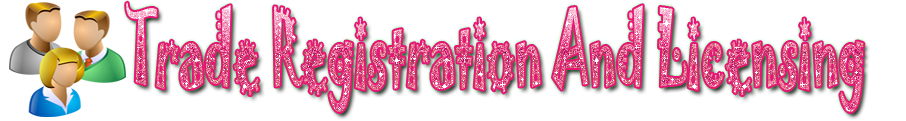
<style>
.page{position:relative;width:906px;height:121px;background:#ffffff}
.page>*{position:absolute;margin:0}
.t1{font:91.8px "Jokerman-Regular";scale:0.49 1}
</style>
<div class="page">
<p class="t1" style="left:126px;top:2px;width:738px;height:110px">Trade Registration And Licensing</p>
</div>
